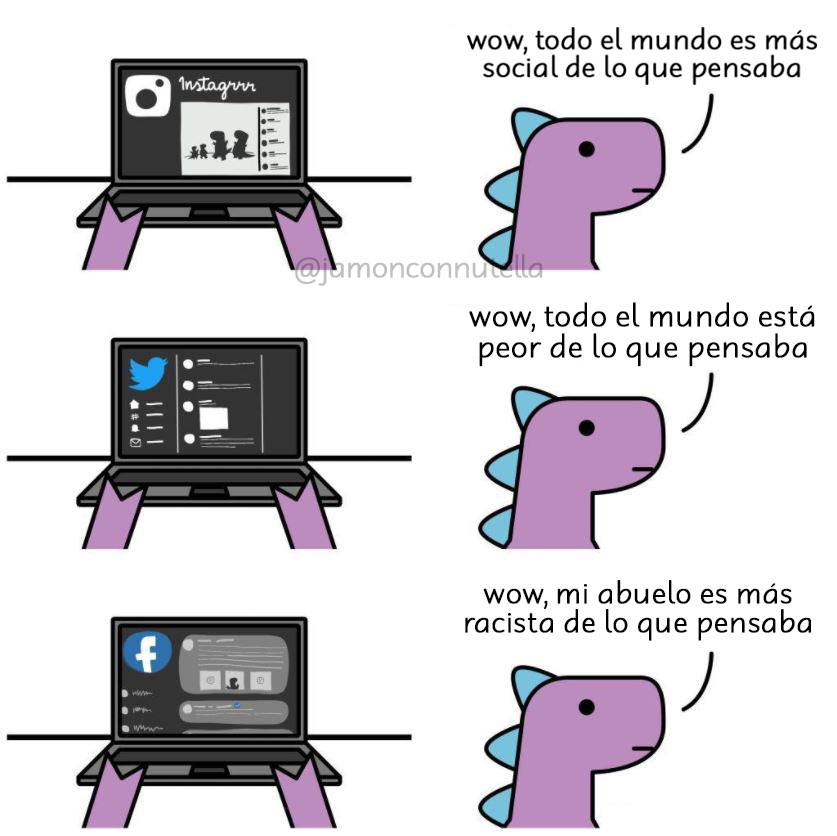
<style>
.page{position:relative;width:837px;height:836px;background:#ffffff}
.page>*{position:absolute;margin:0}
.t1{font:27.5px "RobagaRoundedLight";letter-spacing:-0.04em;color:#c0c0c0;font-weight:bold}
.t2{font:28.1px "RobagaRoundedLight";color:#000000;font-weight:bold}
.t3{font:27.1px "RobagaRoundedLight";color:#000000;font-weight:bold}
</style>
<div class="page">
<p class="t1" style="left:295px;top:254px;width:248px;height:32px">@jamonconnutella</p>
<p class="t2" style="left:469px;top:302px;width:346px;height:65px;text-align:center">wow, todo el mundo está<br>peor de lo que pensaba</p>
<p class="t3" style="left:465px;top:580px;width:346px;height:61px;text-align:center">wow, mi abuelo es más<br>racista de lo que pensaba</p>
</div>
